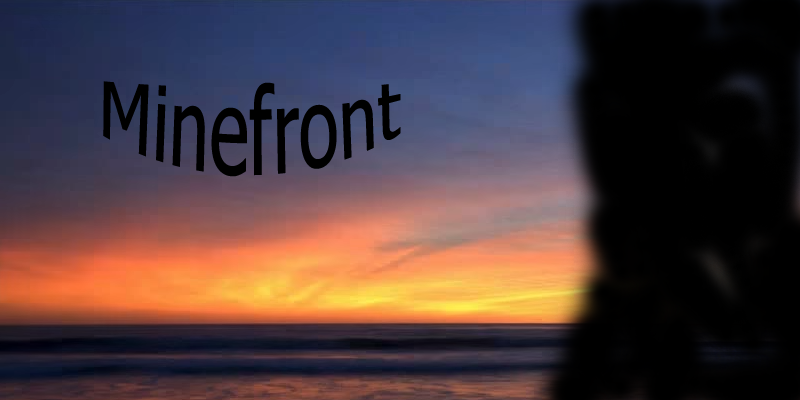
<style>
.page{position:relative;width:800px;height:400px}
.page>*{position:absolute;margin:0}
.t1{font:72px "Tahoma";color:#000000}
</style>
<div class="page">
<p class="t1" style="left:103px;top:81px;width:298px;height:96px">Minefront</p>
</div>
